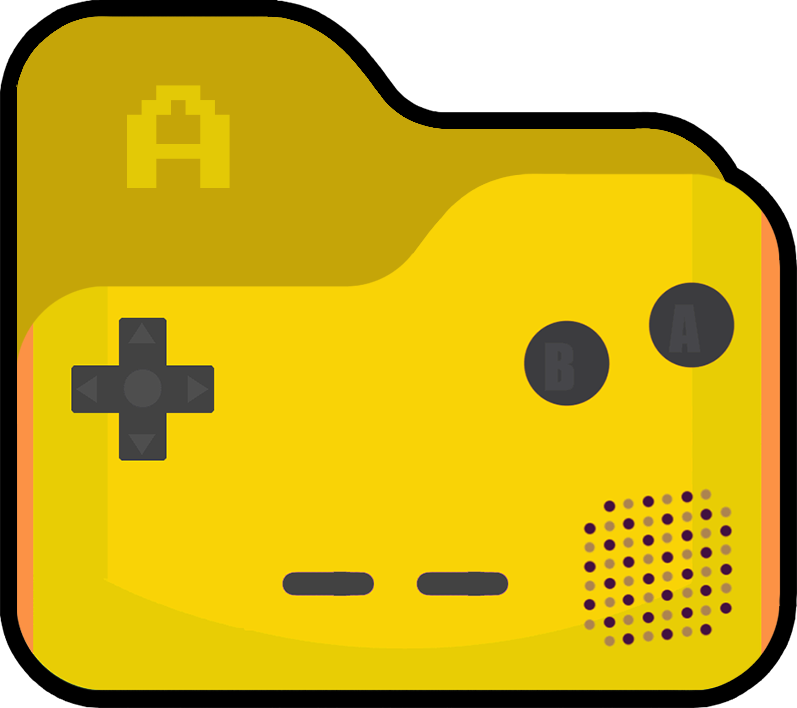
<style>
.page{position:relative;width:797px;height:708px;background:#f9d306}
.page>*{position:absolute;margin:0}
.t1{font:150px "PixelEmulator";color:#e3c906}
</style>
<div class="page">
<p class="t1" style="left:127px;top:85px;width:103px;height:103px">A</p>
</div>
